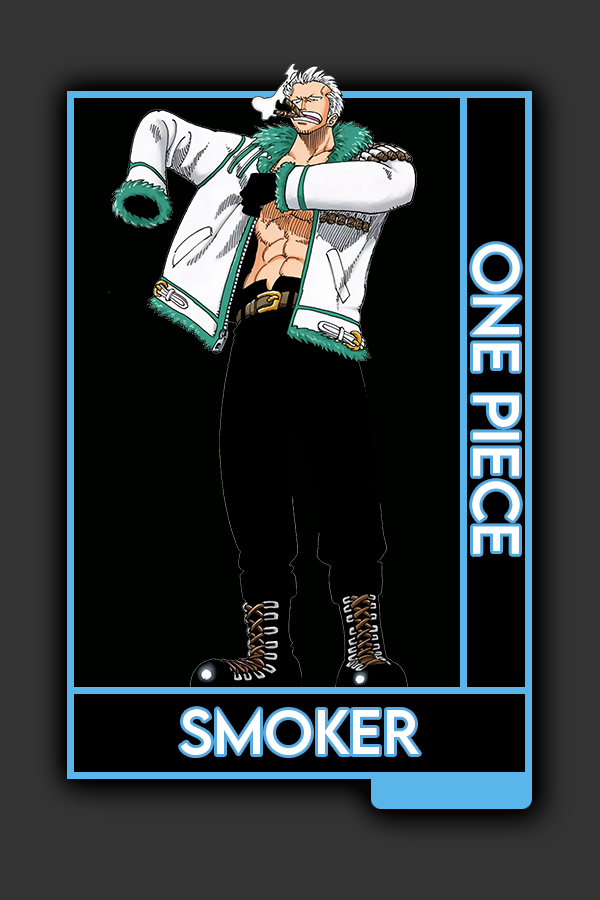
<style>
.page{position:relative;width:600px;height:900px;background:#333333}
.page>*{position:absolute;margin:0}
.t1{font:58.4px "LEMONMILK-Regular";color:#ffffff}
.t2{font:55.4px "LEMONMILK-Regular";color:#ffffff}
</style>
<div class="page">
<p class="t1" style="left:472px;top:244px;width:48px;height:310px;rotate:90deg">One Piece</p>
<p class="t2" style="left:181px;top:709px;width:238px;height:46px">Smoker</p>
</div>
